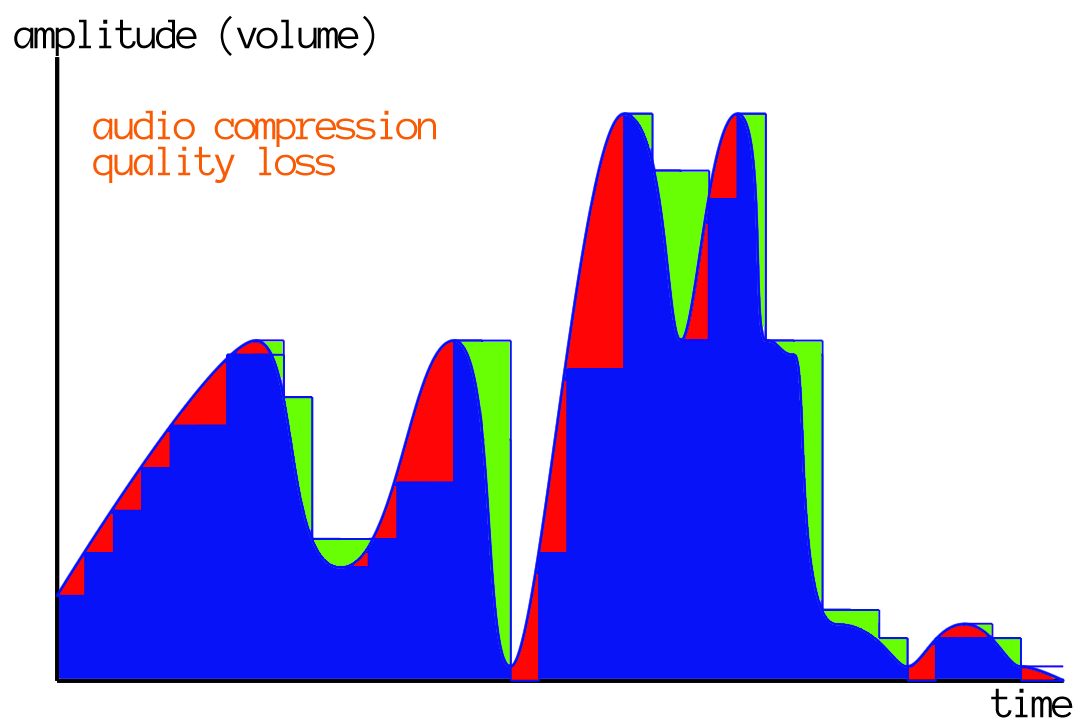
<style>
.page{position:relative;width:1080px;height:720px;background:#ffffff}
.page>*{position:absolute;margin:0}
.t1{font:36px "Anonymous";letter-spacing:-0.105em;color:#000000}
.t2{font:36px/36px "Anonymous";letter-spacing:-0.105em;color:#f95a04}
</style>
<div class="page">
<p class="t1" style="left:14px;top:15px;width:361px;height:41px">amplitude (volume)</p>
<p class="t2" style="left:93px;top:110px;width:343px;height:73px">audio compression<br>quality loss</p>
<p class="t1" style="left:991px;top:688px;width:82px;height:30px">time</p>
</div>
